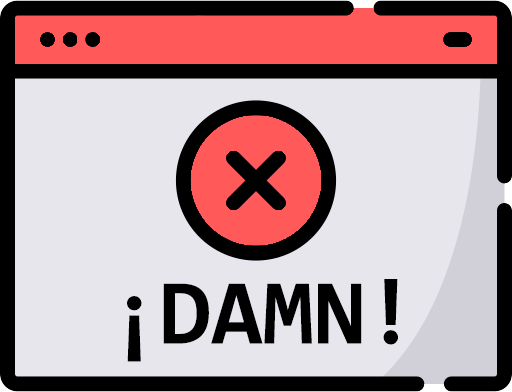
<style>
.page{position:relative;width:512px;height:392px;background:#e8e6ed}
.page>*{position:absolute;margin:0}
.t1{font:93.3px "Consolas-Bold";color:#000000}
</style>
<div class="page">
<p class="t1" style="left:127px;top:279px;width:271px;height:83px">¡DAMN!</p>
</div>
